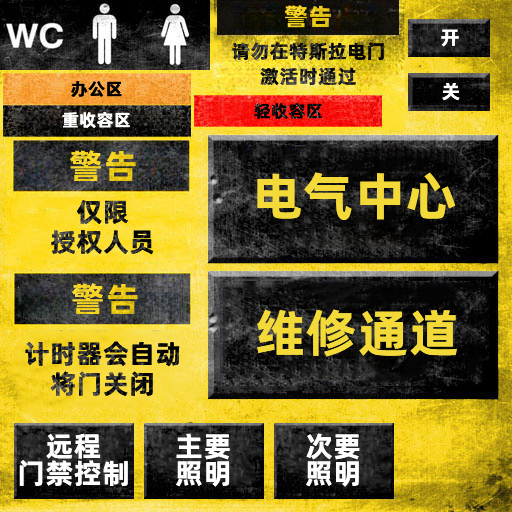
<style>
.page{position:relative;width:512px;height:512px}
.page>*{position:absolute;margin:0}
.t1{font:24.3px "AlibabaPuHuiTiB";letter-spacing:0.02em;color:#efce1b}
.t2{font:19.3px "AlibabaPuHuiTiB";letter-spacing:0.02em;color:#ffffff}
.t3{font:19.3px/25px "AlibabaPuHuiTiB";letter-spacing:0.02em}
.t4{font:17.3px "AlibabaPuHuiTiB";letter-spacing:0.02em;color:#000000}
.t5{font:17.3px "AlibabaPuHuiTiB";letter-spacing:0.02em;color:#ffffff}
.t6{font:34.3px "AlibabaPuHuiTiB";letter-spacing:0.02em;color:#f3d21d}
.t7{font:51.3px "AlibabaPuHuiTiB";letter-spacing:0.02em;color:#f3da38}
.t8{font:26.3px/30px "AlibabaPuHuiTiB";letter-spacing:0.02em}
.t9{font:34.3px "AlibabaPuHuiTiB";letter-spacing:0.02em;color:#f2d11b}
.t10{font:28.3px/27px "AlibabaPuHuiTiB";letter-spacing:0.02em;color:#ffffff}
</style>
<div class="page">
<p class="t1" style="left:284px;top:5px;width:47px;height:23px">警告</p>
<p class="t2" style="left:441px;top:29px;width:18px;height:18px">开</p>
<p class="t3" style="left:232px;top:42px;width:152px;height:43px;text-align:center">请勿在特斯拉电门<br>激活时通过</p>
<p class="t4" style="left:71px;top:81px;width:51px;height:16px">办公区</p>
<p class="t2" style="left:442px;top:83px;width:18px;height:18px">关</p>
<p class="t5" style="left:62px;top:112px;width:68px;height:16px">重收容区</p>
<p class="t4" style="left:254px;top:103px;width:68px;height:16px">轻收容区</p>
<p class="t6" style="left:70px;top:150px;width:66px;height:31px">警告</p>
<p class="t7" style="left:257px;top:172px;width:199px;height:48px">电气中心</p>
<p class="t8" style="left:51px;top:200px;width:103px;height:55px;text-align:center">仅限<br>授权人员</p>
<p class="t9" style="left:72px;top:283px;width:66px;height:31px">警告</p>
<p class="t7" style="left:257px;top:309px;width:200px;height:48px">维修通道</p>
<p class="t8" style="left:25px;top:341px;width:155px;height:55px;text-align:center">计时器会自动<br>将门关闭</p>
<p class="t10" style="left:19px;top:433px;width:109px;height:54px;text-align:center">远程<br>门禁控制</p>
<p class="t10" style="left:176px;top:433px;width:54px;height:54px">主要<br>照明</p>
<p class="t10" style="left:306px;top:433px;width:54px;height:54px">次要<br>照明</p>
</div>
